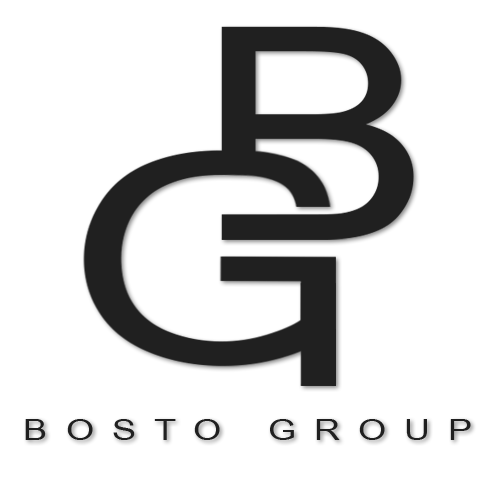
<style>
.page{position:relative;width:500px;height:500px;background:#ffffff}
.page>*{position:absolute;margin:0}
.t1{font:30.1px "ArialNarrow";letter-spacing:0.42em;color:#202020;scale:1.45 1}
</style>
<div class="page">
<p class="t1" style="left:25px;top:419px;width:446px;height:21px">BOSTO GROUP</p>
</div>
